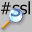
<style>
.page{position:relative;width:32px;height:32px;background:#c1c1c1}
.page>*{position:absolute;margin:0}
.t1{font:17px "Tahoma";color:#000000}
</style>
<div class="page">
<p class="t1" style="left:1px;top:1px;width:29px;height:14px">#ssl</p>
</div>
